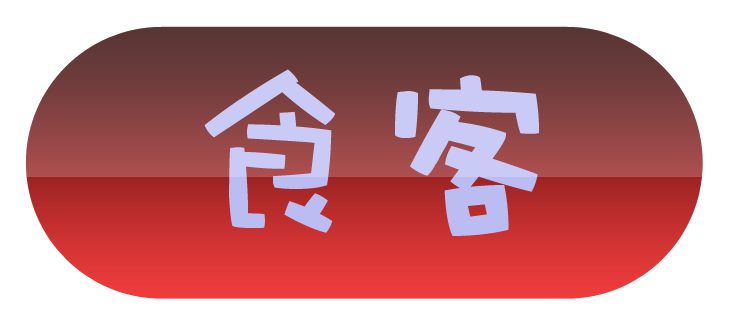
<style>
.page{position:relative;width:750px;height:330px;background:#ffffff}
.page>*{position:absolute;margin:0}
.t1{font:187.5px "DFWaWa-W7-WIN-BF";color:#bbbdf2;font-weight:bold}
</style>
<div class="page">
<p class="t1" style="left:204px;top:69px;width:335px;height:167px">食客</p>
</div>
